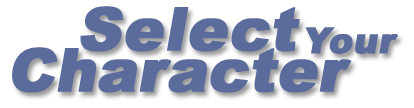
<style>
.page{position:relative;width:414px;height:108px;background:#ffffff}
.page>*{position:absolute;margin:0}
.t1{font:60px "Arial-Black";color:#5a6b9c;font-weight:bold;font-style:italic}
.t2{font:36px "Arial-Black";color:#5a6b9c;font-weight:bold;font-style:italic}
.t3{font:60px "Arial-Black";letter-spacing:-0.01em;color:#5a6b9c;font-weight:bold;font-style:italic}
</style>
<div class="page">
<p class="t1" style="left:80px;top:6px;width:220px;height:46px">Select</p>
<p class="t2" style="left:305px;top:27px;width:93px;height:27px">Your</p>
<p class="t3" style="left:12px;top:47px;width:340px;height:46px">Character</p>
</div>
